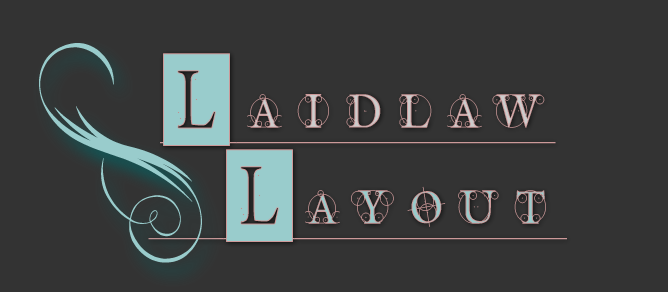
<style>
.page{position:relative;width:668px;height:292px;background:#333333}
.page>*{position:absolute;margin:0}
.t1{font:204.9px "Nymphette";letter-spacing:0.19em;color:#99cccc;scale:0.9 1}
.t2{font:53.4px "TheRoots";letter-spacing:0.19em;color:#cccccc;text-decoration:underline;scale:0.93 1}
.t3{font:92px "TheRoots";letter-spacing:0.19em;color:#99cccc;text-decoration:underline;scale:0.72 1}
.t4{font:53.4px "TheRoots";letter-spacing:0.19em;color:#99cccc;text-decoration:underline;scale:0.93 1}
</style>
<div class="page">
<p class="t1" style="left:39px;top:43px;width:163px;height:220px;rotate:57deg">i</p>
<p class="t2" style="left:148px;top:53px;width:419px;height:189px;text-align:center"><span class="t3">L</span>aidlaw<br> <span class="t3">L</span><span class="t4">ayout</span></p>
</div>
